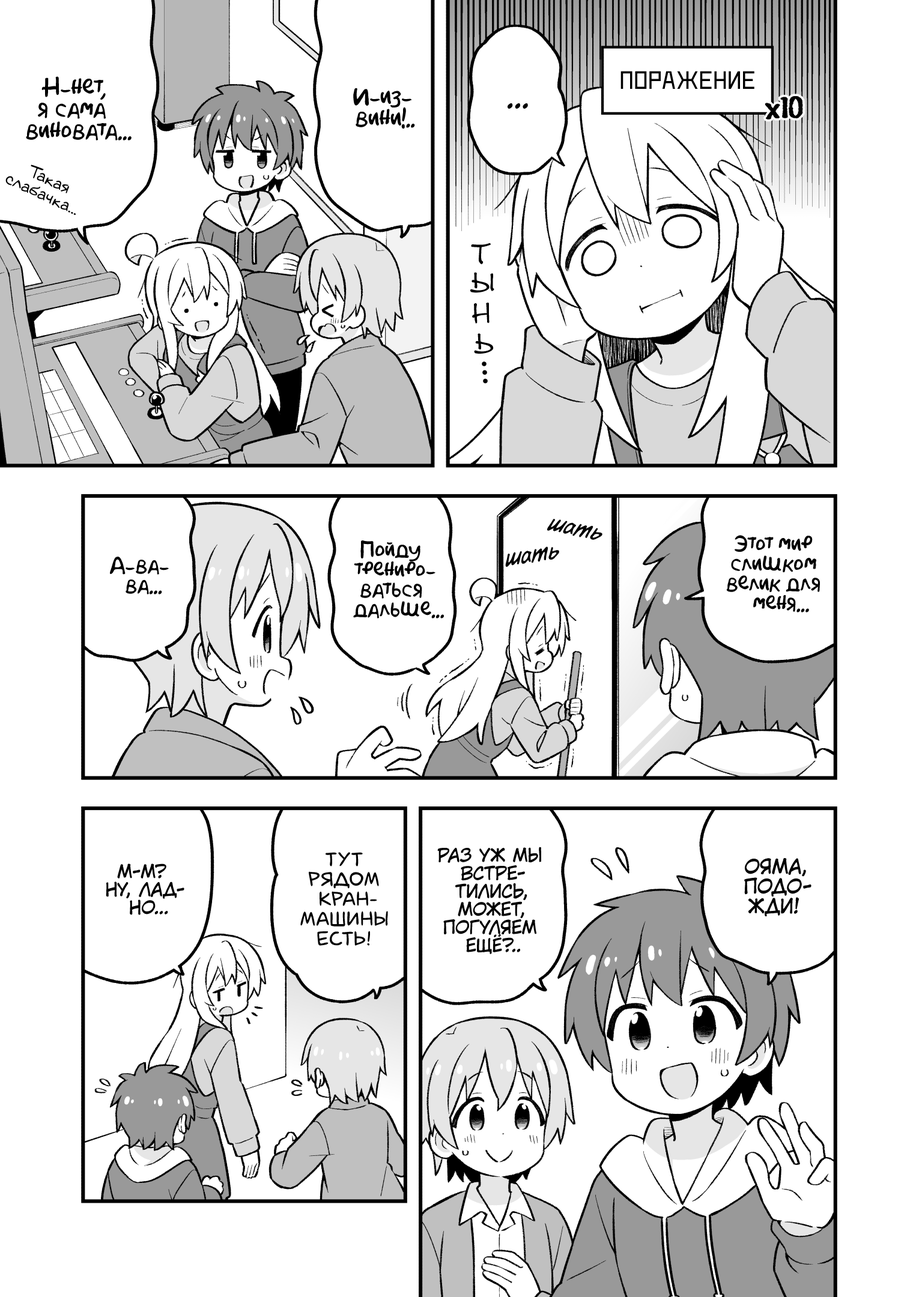
<style>
.page{position:relative;width:919px;height:1297px;background:#ffffff}
.page>*{position:absolute;margin:0}
.t1{font:21.6px "AkbarPlain";color:#000000}
.t2{font:25.2px "DeadMetroC";color:#000000;text-transform:uppercase}
.t3{font:28.8px "KuraiVoice2";color:#000000;text-transform:uppercase}
.t4{font:16.2px "v_Augie";color:#000000}
.t5{font:28.8px "DSNote";color:#000000;font-weight:bold}
.t6{font:28.8px "DSNote";letter-spacing:0.1em;color:#000000}
.t7{font:23.4px "v_CCDearDiary";color:#000000}
.t8{font:19.8px "AkbarPlain";color:#000000}
.t9{font:19.8px "laCartoonerie";color:#000000;text-transform:uppercase}
.t10{font:18px "KuraiVoice2";color:#000000;text-transform:uppercase}
.t11{font:19.8px "KuraiVoice2";color:#000000;text-transform:uppercase}
</style>
<div class="page">
<p class="t1" style="left:26px;top:76px;width:106px;height:65px;text-align:center">Н-нет,<br>я сама<br>виновата...</p>
<p class="t2" style="left:621px;top:71px;width:133px;height:18px">поражение</p>
<p class="t1" style="left:353px;top:88px;width:62px;height:41px;text-align:center">И-из-<br>вини!..</p>
<p class="t3" style="left:508px;top:103px;width:20px;height:6px">...</p>
<p class="t4" style="left:5px;top:165px;width:71px;height:50px;text-align:center;rotate:25deg">Такая<br>слабачка...</p>
<p class="t5" style="left:471px;top:243px;width:20px;height:21px;rotate:-6deg">т</p>
<p class="t5" style="left:470px;top:272px;width:24px;height:21px;rotate:-2deg">ы</p>
<p class="t5" style="left:472px;top:303px;width:18px;height:21px;rotate:-3deg">н</p>
<p class="t5" style="left:474px;top:333px;width:20px;height:21px;rotate:-3deg">ь</p>
<p class="t6" style="left:482px;top:362px;width:6px;height:22px;rotate:86deg">...</p>
<p class="t7" style="left:547px;top:519px;width:55px;height:21px;rotate:12deg">шать</p>
<p class="t8" style="left:353px;top:541px;width:91px;height:78px;text-align:center">Пойду<br>трениро-<br>ваться<br>дальше...</p>
<p class="t8" style="left:726px;top:535px;width:94px;height:78px;text-align:center">Этот мир<br>слишком<br>велик для<br>меня...</p>
<p class="t8" style="left:110px;top:557px;width:59px;height:38px;text-align:center">А-ва-<br>ва...</p>
<p class="t7" style="left:505px;top:547px;width:54px;height:20px;rotate:-9deg">шать</p>
<p class="t9" style="left:300px;top:852px;width:88px;height:94px;text-align:center">Тут<br>рядом<br>кран-<br>машины<br>есть!</p>
<p class="t10" style="left:437px;top:847px;width:104px;height:107px;text-align:center">Раз уж мы<br>встре-<br>тились,<br>может,<br>погуляем<br>ещё?..</p>
<p class="t10" style="left:106px;top:864px;width:78px;height:51px;text-align:center">М-м?<br>Ну, лад-<br>но...</p>
<p class="t11" style="left:744px;top:858px;width:68px;height:59px;text-align:center">Ояма,<br>подо-<br>жди!</p>
</div>
